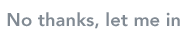
<style>
.page{position:relative;width:188px;height:43px;background:#ffffff}
.page>*{position:absolute;margin:0}
.t1{font:18.3px "Avenir-Heavy";letter-spacing:0.005em;color:#818a93}
</style>
<div class="page">
<p class="t1" style="left:7px;top:12px;width:173px;height:17px">No thanks, let me in</p>
</div>
